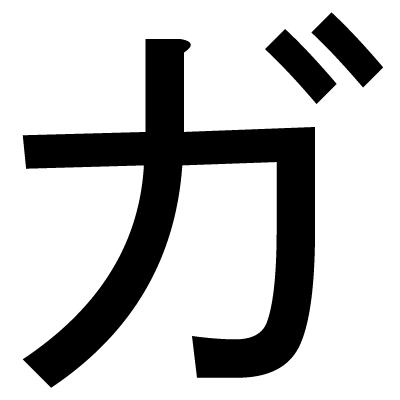
<style>
.page{position:relative;width:400px;height:400px;background:#ffffff}
.page>*{position:absolute;margin:0}
.t1{font:424.8px "MS-PGothic";color:#000000}
</style>
<div class="page">
<p class="t1" style="left:22px;top:12px;width:361px;height:376px">ガ</p>
</div>
